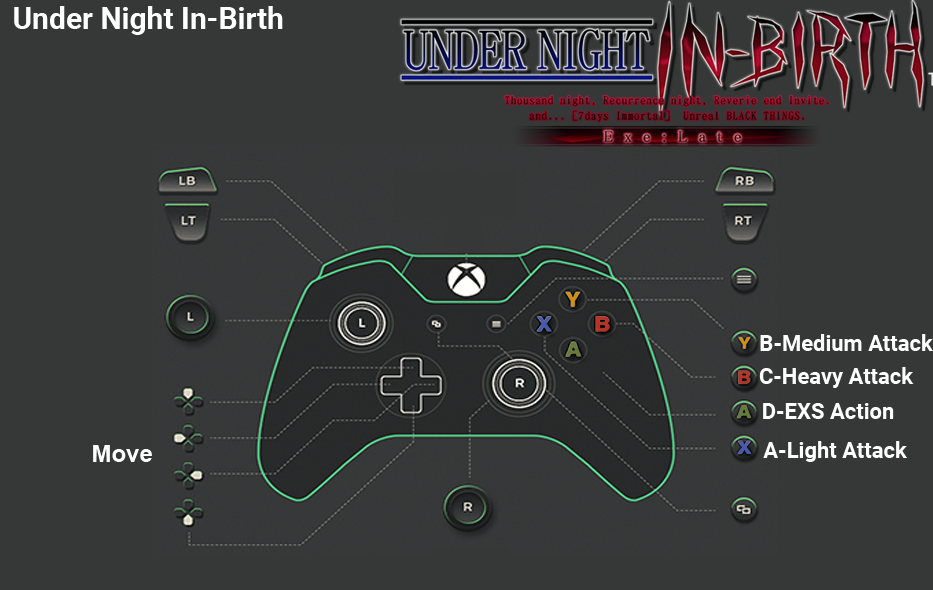
<style>
.page{position:relative;width:933px;height:590px;background:#363838}
.page>*{position:absolute;margin:0}
.t1{font:30px "Roboto-Bold";color:#ffffff}
.t2{font:22px "Roboto-Bold";color:#ffffff}
.t3{font:24px "Arial-BoldMT";color:#fefefe}
</style>
<div class="page">
<p class="t1" style="left:14px;top:6px;width:269px;height:29px">Under Night In-Birth</p>
<p class="t2" style="left:760px;top:334px;width:173px;height:17px">B-Medium Attack</p>
<p class="t2" style="left:759px;top:367px;width:155px;height:21px">C-Heavy Attack</p>
<p class="t2" style="left:763px;top:403px;width:131px;height:16px">D-EXS Action</p>
<p class="t3" style="left:93px;top:445px;width:59px;height:17px">Move</p>
<p class="t2" style="left:763px;top:441px;width:144px;height:21px">A-Light Attack</p>
</div>
